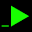
<style>
.page{position:relative;width:32px;height:32px;background:#000000}
.page>*{position:absolute;margin:0}
.t1{font:12px "ArialMT"}
</style>
<div class="page">
<p class="t1" style="left:1px;top:25px;width:8px;height:2px">_</p>
</div>
